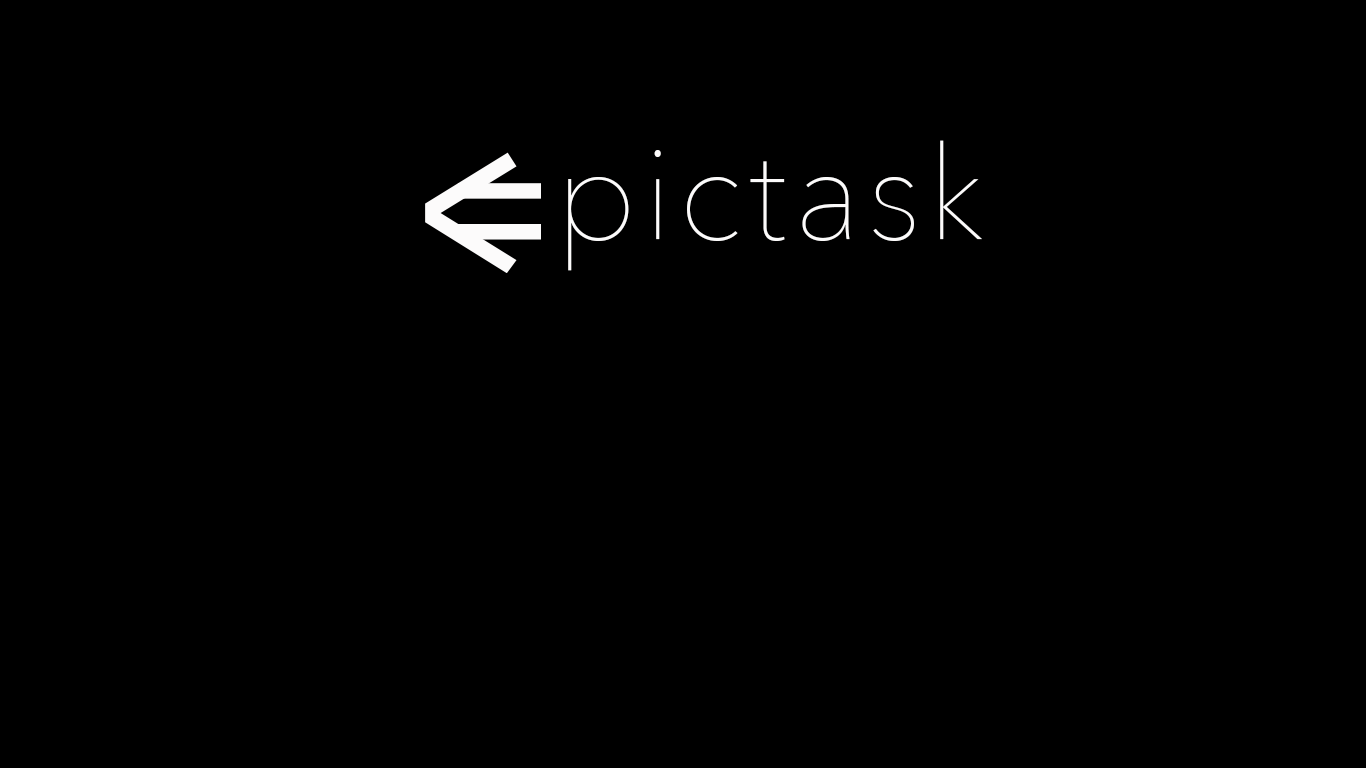
<style>
.page{position:relative;width:1366px;height:768px;background:#000000}
.page>*{position:absolute;margin:0}
.t1{font:130px "AvenirNext-UltraLight";letter-spacing:0.05em;color:#fcfbfb}
</style>
<div class="page">
<p class="t1" style="left:568px;top:140px;width:414px;height:131px">pictask</p>
</div>
